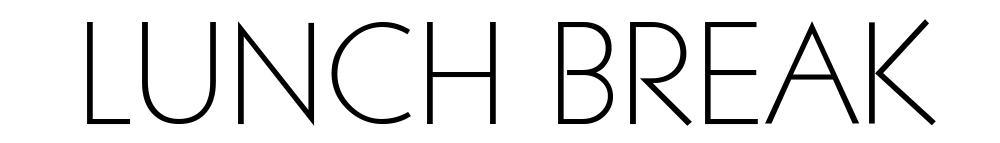
<style>
.page{position:relative;width:1000px;height:143px;background:#ffffff}
.page>*{position:absolute;margin:0}
.t1{font:140.4px "LitheLight";color:#000000}
</style>
<div class="page">
<p class="t1" style="left:87px;top:19px;width:849px;height:107px">LUNCH BREAK</p>
</div>
